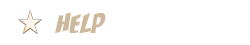
<style>
.page{position:relative;width:250px;height:45px;background:#ffffff}
.page>*{position:absolute;margin:0}
.t1{font:30px "HoustonComicsPersonalUse";color:#cdb99d}
</style>
<div class="page">
<p class="t1" style="left:55px;top:12px;width:51px;height:22px">HELP</p>
</div>
